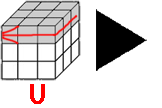
<style>
.page{position:relative;width:162px;height:108px;background:#ffffff}
.page>*{position:absolute;margin:0}
.t1{font:27px "MyriadPro-Regular";color:#ff0000;font-weight:bold}
</style>
<div class="page">
<p class="t1" style="left:30px;top:84px;width:15px;height:20px">U</p>
</div>
